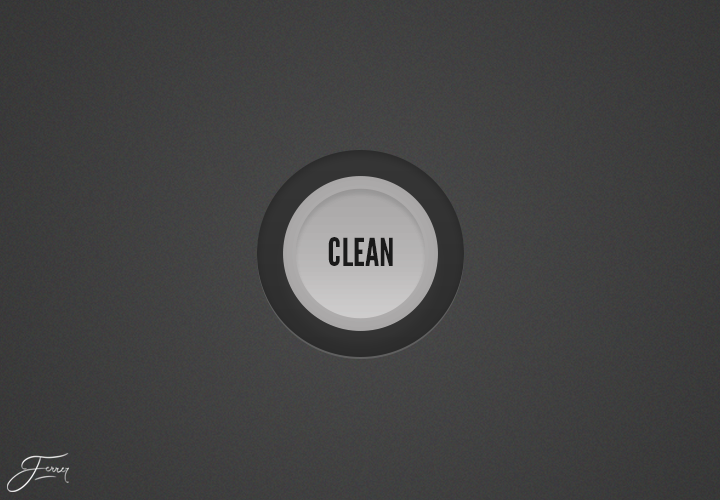
<style>
.page{position:relative;width:720px;height:500px}
.page>*{position:absolute;margin:0}
.t1{font:38.4px "LeagueGothic-Regular";color:#242424}
</style>
<div class="page">
<p class="t1" style="left:328px;top:237px;width:65px;height:29px">CLEAN</p>
</div>
